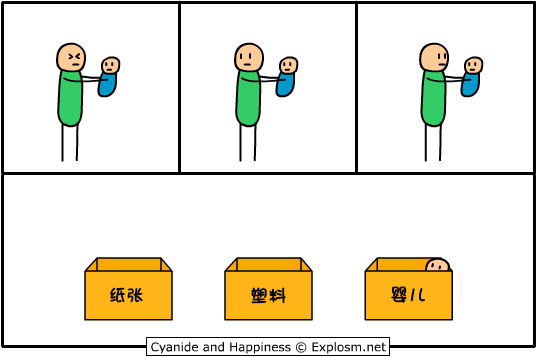
<style>
.page{position:relative;width:537px;height:357px;background:#ffffff}
.page>*{position:absolute;margin:0}
.t1{font:17px "DFGirl";color:#000000;font-weight:bold}
.t2{font:18px "DFGirl";color:#000000;font-weight:bold}
</style>
<div class="page">
<p class="t1" style="left:110px;top:287px;width:33px;height:16px">纸张</p>
<p class="t2" style="left:251px;top:287px;width:35px;height:17px">塑料</p>
<p class="t2" style="left:391px;top:286px;width:34px;height:17px">婴儿</p>
</div>
